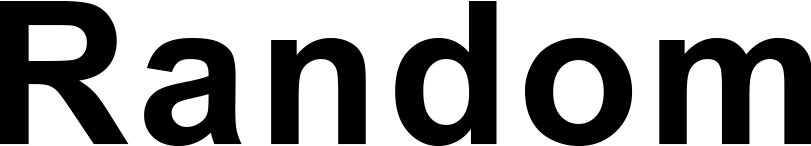
<style>
.page{position:relative;width:811px;height:146px;background:#ffffff}
.page>*{position:absolute;margin:0}
.t1{font:200px "Arial-BoldMT";letter-spacing:0.04em;color:#000000}
</style>
<div class="page">
<p class="t1" style="left:0px;top:1px;width:812px;height:145px">Random</p>
</div>
